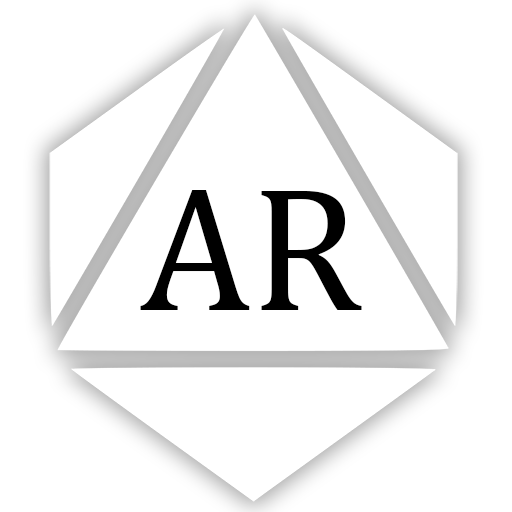
<style>
.page{position:relative;width:512px;height:512px;background:#ffffff}
.page>*{position:absolute;margin:0}
.t1{font:177.8px "CambriaMath";color:#000000}
</style>
<div class="page">
<p class="t1" style="left:140px;top:190px;width:222px;height:120px">AR</p>
</div>
